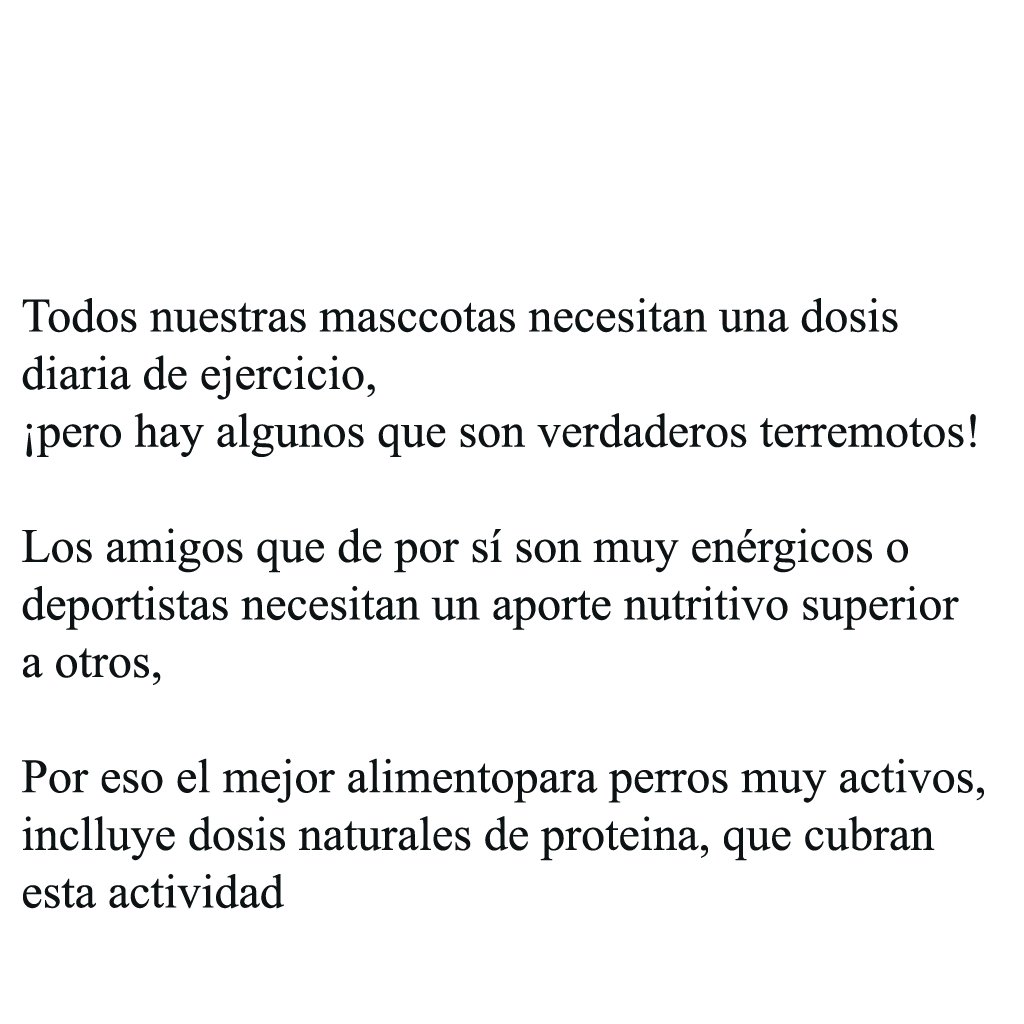
<style>
.page{position:relative;width:1024px;height:1024px;background:#ffffff}
.page>*{position:absolute;margin:0}
.t1{font:48px "TimesNewRomanPSMT";color:#0d1314}
</style>
<div class="page">
<p class="t1" style="left:22px;top:298px;width:962px;height:611px">Todos nuestras masccotas necesitan una dosis <br>diaria de ejercicio, <br>¡pero hay algunos que son verdaderos terremotos! <br><br>Los amigos que de por sí son muy enérgicos o <br>deportistas necesitan un aporte nutritivo superior <br>a otros,<br> <br>Por eso el mejor alimentopara perros muy activos,<br>inclluye dosis naturales de proteina, que cubran <br>esta actividad</p>
</div>
